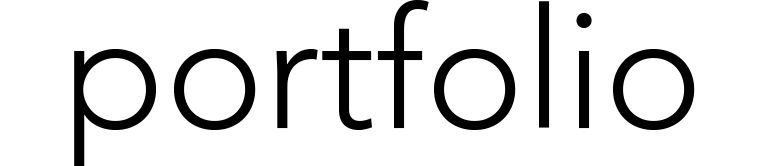
<style>
.page{position:relative;width:768px;height:166px;background:#ffffff}
.page>*{position:absolute;margin:0}
.t1{font:167px "Avenir-Light";color:#000000}
</style>
<div class="page">
<p class="t1" style="left:74px;top:0px;width:621px;height:166px">portfolio</p>
</div>
